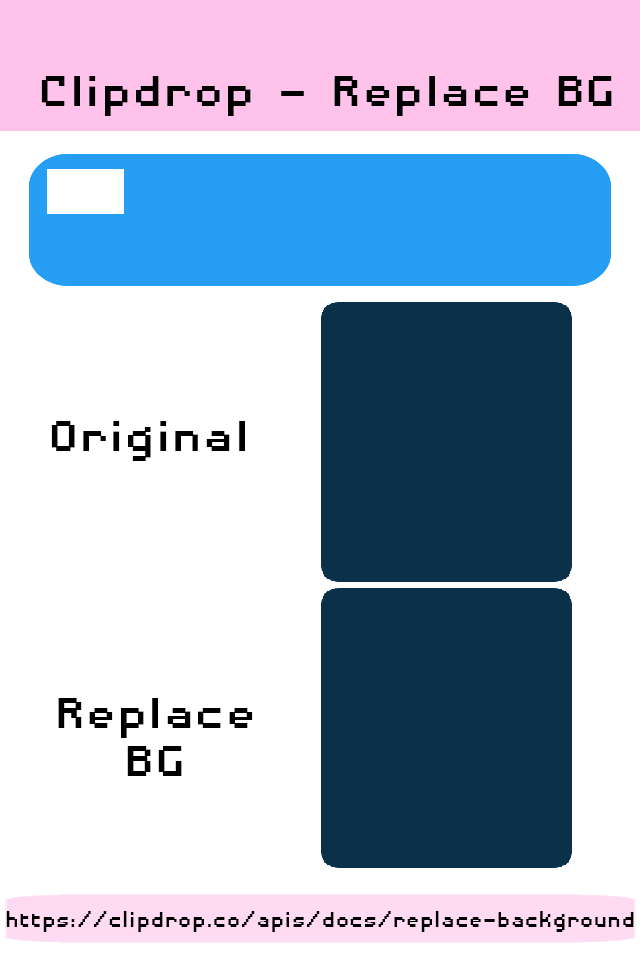
<style>
.page{position:relative;width:640px;height:960px;background:#ffffff}
.page>*{position:absolute;margin:0}
.t1{font:55.8px "DisposableDroidBB";color:#000000;scale:1.14 1}
.t2{font:55.8px/48px "DisposableDroidBB";color:#000000;scale:1.14 1}
.t3{font:28.8px "DisposableDroidBB";color:#000000}
</style>
<div class="page">
<p class="t1" style="left:41px;top:76px;width:571px;height:40px">Clipdrop - Replace BG</p>
<p class="t1" style="left:51px;top:421px;width:194px;height:40px">Original</p>
<p class="t2" style="left:58px;top:698px;width:195px;height:78px;text-align:center">Replace<br>BG</p>
<p class="t3" style="left:6px;top:911px;width:628px;height:21px">https://clipdrop.co/apis/docs/replace-background</p>
</div>
